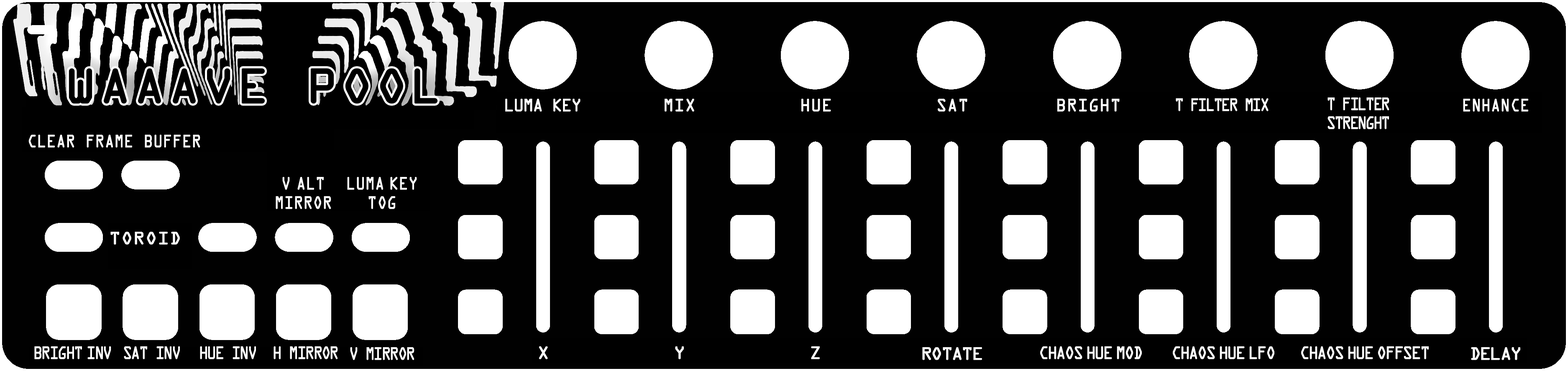
<style>
.page{position:relative;width:1568px;height:371px;background:#010101}
.page>*{position:absolute;margin:0}
.t1{font:52.3px "OCRAExtended";letter-spacing:0.03em;color:#000000;text-transform:uppercase;font-weight:bold}
.t2{font:19.2px "OCRAExtended";letter-spacing:-0.075em;color:#ffffff;text-transform:uppercase;font-weight:bold;scale:0.9 1}
.t3{font:19.2px "OCRAExtended";color:#ffffff;text-transform:uppercase;font-weight:bold;scale:0.9 1}
.t4{font:19.2px "OCRAExtended";letter-spacing:-0.125em;color:#ffffff;text-transform:uppercase;font-weight:bold;scale:0.8 1}
.t5{font:19.2px/19.2px "OCRAExtended";letter-spacing:-0.125em;color:#ffffff;text-transform:uppercase;font-weight:bold;scale:0.8 1}
.t6{font:19.2px "OCRAExtended";color:#ffffff;text-transform:uppercase;font-weight:bold;scale:0.8 1}
.t7{font:19.2px/19.2px "OCRAExtended";color:#ffffff;text-transform:uppercase;font-weight:bold;scale:0.8 1}
.t8{font:19.2px "OCRAExtended";color:#ffffff;text-transform:uppercase;font-weight:bold}
.t9{font:19.2px "OCRAExtended";letter-spacing:-0.1em;color:#ffffff;text-transform:uppercase;font-weight:bold;scale:0.8 1}
.t10{font:19.2px "OCRAExtended";letter-spacing:-0.1em;color:#ffffff;text-transform:uppercase;font-weight:bold}
.t11{font:19.2px "OCRAExtended";letter-spacing:-0.1em;color:#ffffff;text-transform:uppercase;font-weight:bold;scale:0.85 1}
</style>
<div class="page">
<p class="t1" style="left:69px;top:68px;width:369px;height:36px">WAAAVE POOL</p>
<p class="t2" style="left:505px;top:99px;width:76px;height:13px">LUMA KEY</p>
<p class="t3" style="left:665px;top:99px;width:29px;height:13px">MIX</p>
<p class="t3" style="left:801px;top:99px;width:30px;height:13px">HUE</p>
<p class="t3" style="left:938px;top:99px;width:29px;height:13px">SAT</p>
<p class="t3" style="left:1057px;top:99px;width:63px;height:13px">BRIGHT</p>
<p class="t4" style="left:1176px;top:98px;width:93px;height:13px">T FILTER MIX</p>
<p class="t5" style="left:1328px;top:97px;width:61px;height:32px;text-align:center">T FILTER<br>STRENGHT</p>
<p class="t6" style="left:1463px;top:99px;width:65px;height:13px">ENHANCE</p>
<p class="t6" style="left:28px;top:135px;width:172px;height:13px">CLEAR FRAME BUFFER</p>
<p class="t7" style="left:276px;top:177px;width:55px;height:32px;text-align:center">V alt<br>MIRROR</p>
<p class="t7" style="left:347px;top:177px;width:70px;height:32px;text-align:center">LUMA KEY<br>TOG</p>
<p class="t8" style="left:110px;top:232px;width:70px;height:13px">TOROID</p>
<p class="t9" style="left:34px;top:346px;width:77px;height:13px">BRIGHT INV</p>
<p class="t9" style="left:124px;top:346px;width:56px;height:13px">SAT INV</p>
<p class="t9" style="left:200px;top:346px;width:56px;height:13px">HUE INV</p>
<p class="t9" style="left:274px;top:346px;width:64px;height:13px">H MIRROR</p>
<p class="t9" style="left:350px;top:347px;width:64px;height:13px">V MIRROR</p>
<p class="t8" style="left:539px;top:346px;width:9px;height:13px">X</p>
<p class="t8" style="left:675px;top:346px;width:9px;height:13px">Y</p>
<p class="t8" style="left:811px;top:346px;width:9px;height:13px">Z</p>
<p class="t10" style="left:922px;top:347px;width:60px;height:13px">ROTATE</p>
<p class="t11" style="left:1040px;top:346px;width:102px;height:13px">CHAOS HUE MOD</p>
<p class="t11" style="left:1173px;top:346px;width:101px;height:13px">CHAOS HUE LFO</p>
<p class="t11" style="left:1301px;top:346px;width:128px;height:13px">CHAOS HUE OFFSET</p>
<p class="t10" style="left:1471px;top:347px;width:49px;height:13px">DELAY</p>
</div>
